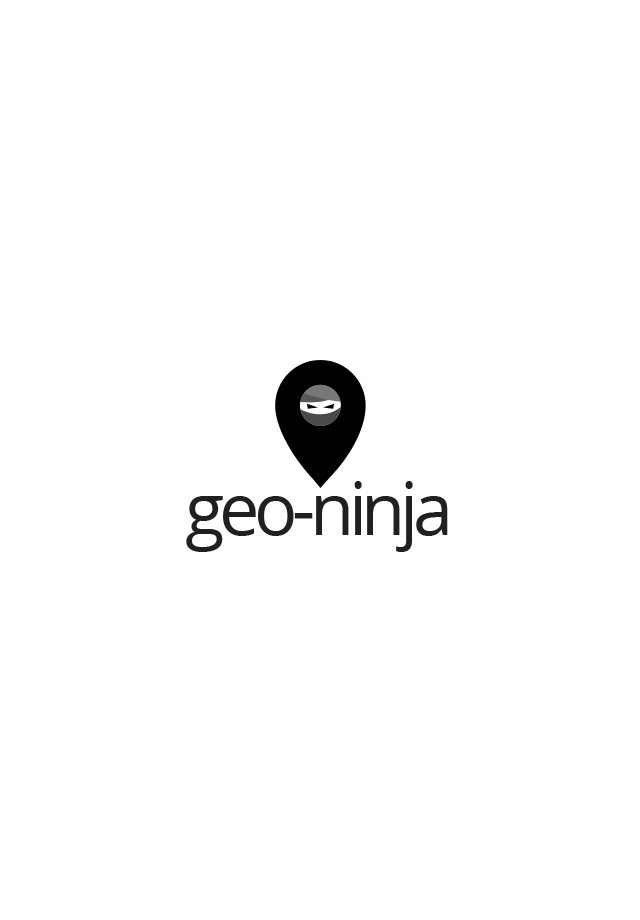
<style>
.page{position:relative;width:640px;height:920px;background:#ffffff}
.page>*{position:absolute;margin:0}
.t1{font:72px "OpenSans";letter-spacing:-0.075em;color:#202020}
</style>
<div class="page">
<p class="t1" style="left:186px;top:481px;width:262px;height:71px">geo-ninja</p>
</div>
